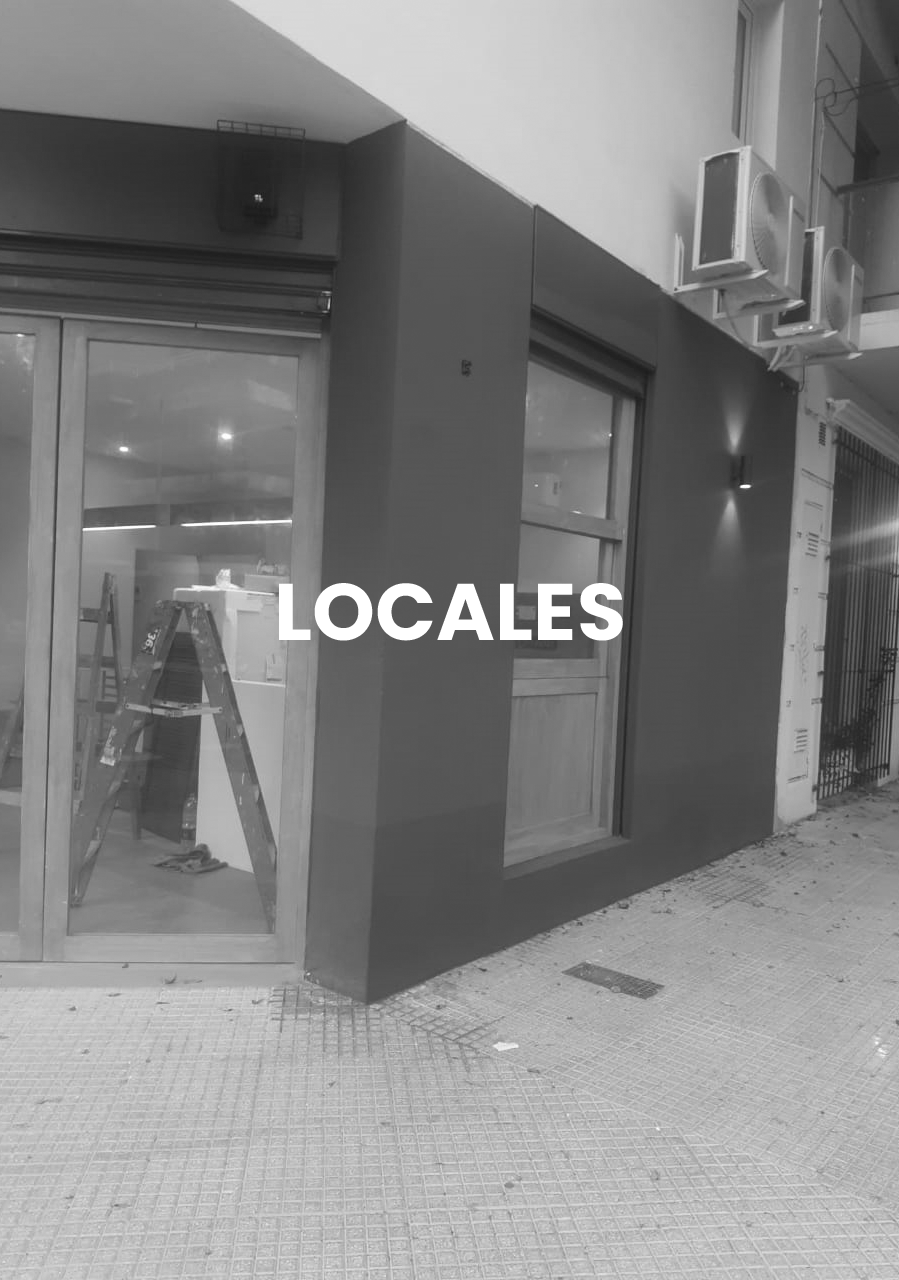
<style>
.page{position:relative;width:899px;height:1280px}
.page>*{position:absolute;margin:0}
.t1{font:80px "Poppins-Bold";color:#ffffff}
</style>
<div class="page">
<p class="t1" style="left:279px;top:583px;width:344px;height:58px">LOCALES</p>
</div>
